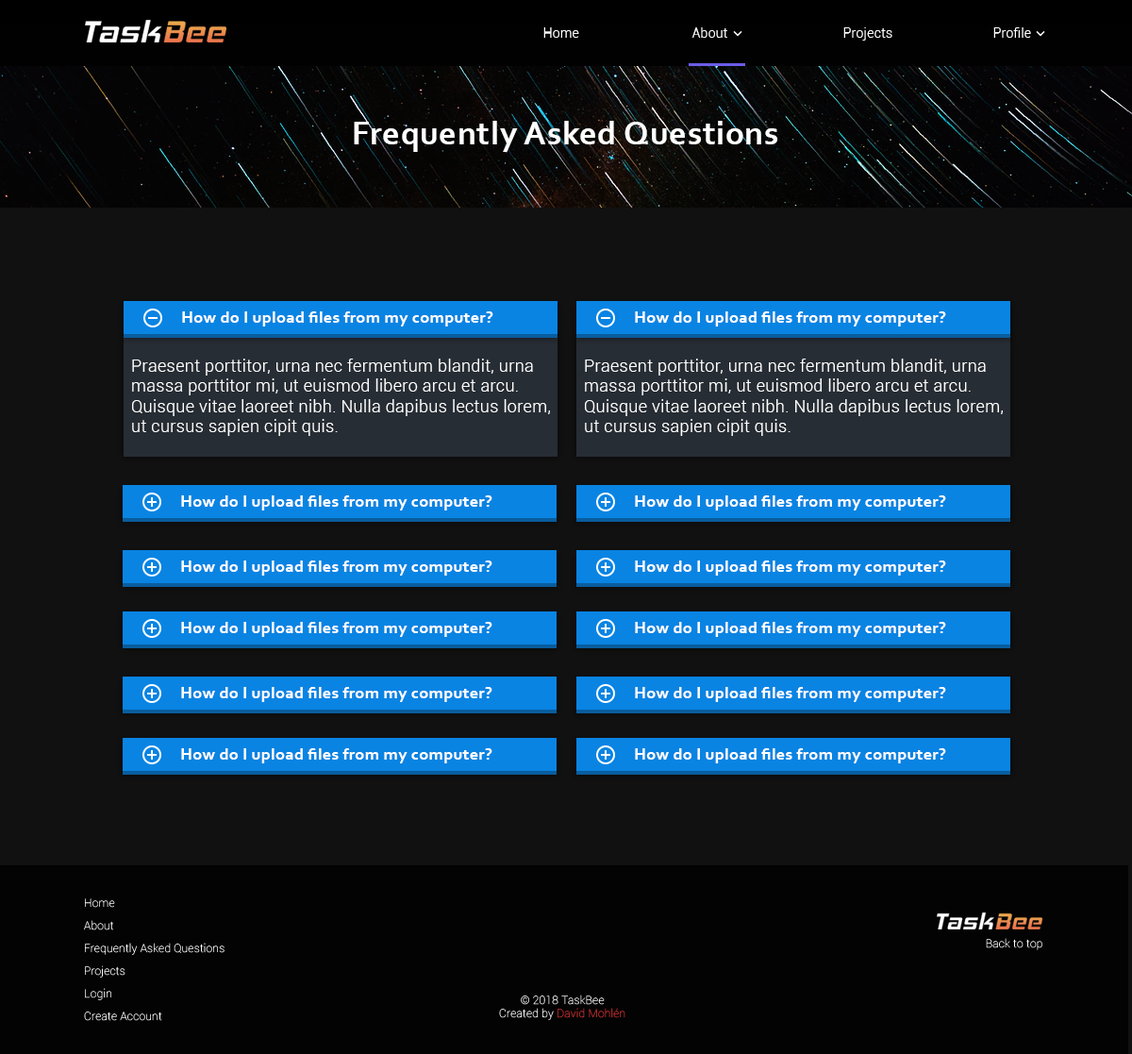
<style>
.page{position:relative;width:1132px;height:1054px;background:#111111}
.page>*{position:absolute;margin:0}
.t1{font:13.2px "Roboto-Light";letter-spacing:0.02em;color:#ffffff}
.t2{font:34px "Corbel-Bold";letter-spacing:0.02em;color:#ffffff}
.t3{font:17px "Corbel-Bold";letter-spacing:0.02em;color:#ffffff}
.t4{font:17px "Roboto-Light";letter-spacing:0.02em;color:#ffffff}
.t5{font:11.3px/22.6px "Roboto-Thin";letter-spacing:0.02em;color:#ffffff}
.t6{font:11.3px "Roboto-Thin";letter-spacing:0.02em;color:#ffffff}
.t7{font:11.3px "Roboto-Thin";letter-spacing:0.02em;color:#d63031}
</style>
<div class="page">
<p class="t1" style="left:543px;top:27px;width:36px;height:11px">Home</p>
<p class="t1" style="left:692px;top:27px;width:35px;height:11px">About</p>
<p class="t1" style="left:843px;top:27px;width:49px;height:14px">Projects</p>
<p class="t1" style="left:993px;top:27px;width:38px;height:11px">Profile</p>
<p class="t2" style="left:354px;top:121px;width:423px;height:31px">Frequently Asked Questions</p>
<p class="t3" style="left:182px;top:311px;width:311px;height:15px">How do I upload files from my computer?</p>
<p class="t3" style="left:635px;top:311px;width:311px;height:15px">How do I upload files from my computer?</p>
<p class="t4" style="left:132px;top:358px;width:418px;height:78px">Praesent porttitor, urna nec fermentum blandit, urna<br>massa porttitor mi, ut euismod libero arcu et arcu.<br>Quisque vitae laoreet nibh. Nulla dapibus lectus lorem,<br>ut cursus sapien cipit quis.</p>
<p class="t4" style="left:585px;top:358px;width:418px;height:78px">Praesent porttitor, urna nec fermentum blandit, urna<br>massa porttitor mi, ut euismod libero arcu et arcu.<br>Quisque vitae laoreet nibh. Nulla dapibus lectus lorem,<br>ut cursus sapien cipit quis.</p>
<p class="t3" style="left:181px;top:495px;width:311px;height:15px">How do I upload files from my computer?</p>
<p class="t3" style="left:635px;top:495px;width:311px;height:15px">How do I upload files from my computer?</p>
<p class="t3" style="left:181px;top:560px;width:311px;height:15px">How do I upload files from my computer?</p>
<p class="t3" style="left:635px;top:560px;width:311px;height:15px">How do I upload files from my computer?</p>
<p class="t3" style="left:181px;top:622px;width:311px;height:15px">How do I upload files from my computer?</p>
<p class="t3" style="left:635px;top:622px;width:311px;height:15px">How do I upload files from my computer?</p>
<p class="t3" style="left:181px;top:687px;width:311px;height:15px">How do I upload files from my computer?</p>
<p class="t3" style="left:635px;top:687px;width:311px;height:15px">How do I upload files from my computer?</p>
<p class="t3" style="left:181px;top:748px;width:311px;height:15px">How do I upload files from my computer?</p>
<p class="t3" style="left:635px;top:748px;width:311px;height:15px">How do I upload files from my computer?</p>
<p class="t5" style="left:84px;top:898px;width:140px;height:123px">Home<br>About<br>Frequently Asked Questions<br>Projects<br>Login<br>Create Account</p>
<p class="t6" style="left:986px;top:938px;width:56px;height:12px">Back to top</p>
<p class="t6" style="left:499px;top:994px;width:126px;height:26px;text-align:center">© 2018 TaskBee<br>Created by <span class="t7">David Mohlén</span></p>
</div>
